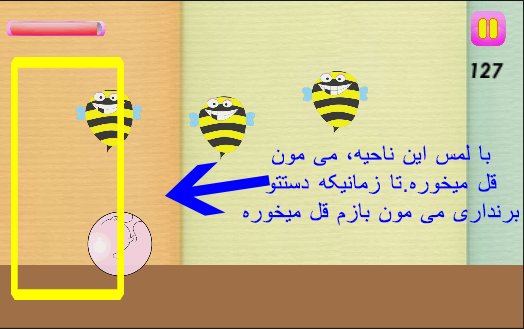
<style>
.page{position:relative;width:524px;height:329px}
.page>*{position:absolute;margin:0}
.t1{font:24px "ArialMT";letter-spacing:0.025em;color:#0000ff}
</style>
<div class="page">
<p class="t1" style="left:243px;top:144px;width:276px;height:82px;text-align:center">با لمس این ناحیه، می مون<br>قل میخوره.تا زمانیکه دستتو<br>برنداری می مون بازم قل میخوره</p>
</div>
